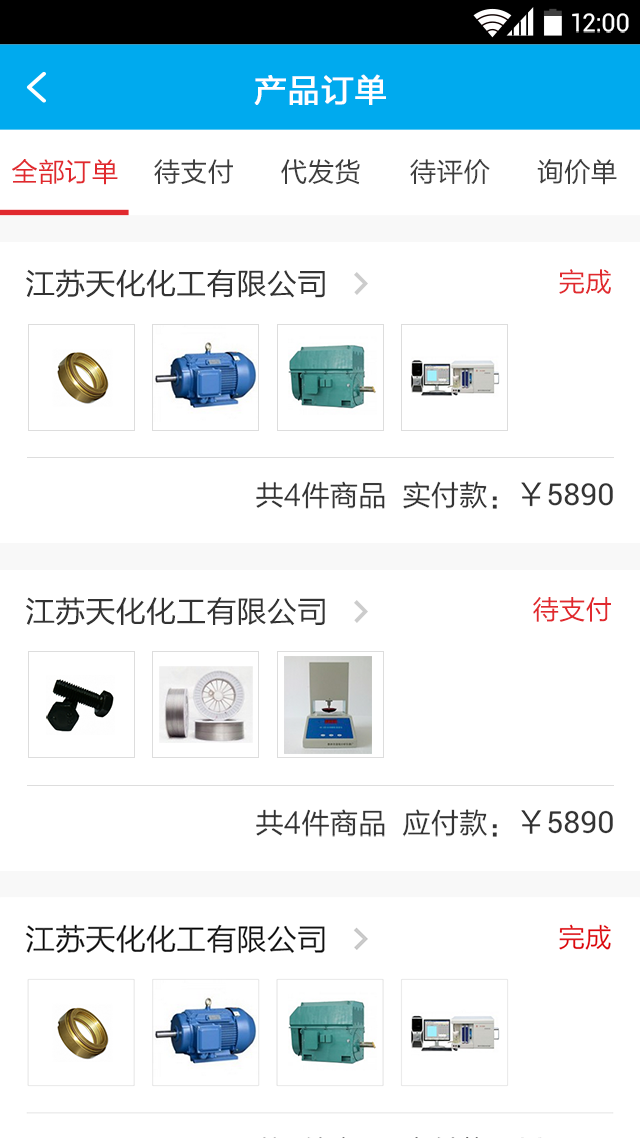
<style>
.page{position:relative;width:640px;height:1138px;background:#ffffff}
.page>*{position:absolute;margin:0}
.t1{font:24.9px "Roboto-Regular";color:#ffffff}
.t2{font:32px "FZLTHJW--GB1-0";letter-spacing:0.02em;color:#ffffff;font-weight:bold}
.t3{font:26.7px "FZLTHJW--GB1-0";color:#e1292e}
.t4{font:26.7px "FZLTHJW--GB1-0";color:#3d3d3d}
.t5{font:30.2px "FZLTHJW--GB1-0";color:#333333}
.t6{font:28.4px "FZLTHJW--GB1-0";color:#333333}
.t7{font:30.2px "Roboto-Regular";color:#333333}
</style>
<div class="page">
<p class="t1" style="left:572px;top:13px;width:57px;height:20px">12:00</p>
<p class="t2" style="left:254px;top:74px;width:132px;height:31px">产品订单</p>
<p class="t3" style="left:12px;top:159px;width:106px;height:26px">全部订单</p>
<p class="t4" style="left:154px;top:159px;width:79px;height:26px">待支付</p>
<p class="t4" style="left:281px;top:159px;width:79px;height:26px">代发货</p>
<p class="t4" style="left:410px;top:159px;width:80px;height:25px">待评价</p>
<p class="t4" style="left:537px;top:159px;width:80px;height:26px">询价单</p>
<p class="t5" style="left:26px;top:269px;width:299px;height:29px">江苏天化化工有限公司</p>
<p class="t3" style="left:559px;top:269px;width:52px;height:25px">完成</p>
<p class="t6" style="left:256px;top:481px;width:357px;height:28px">共4件商品  实付款：<span class="t5">￥</span><span class="t7">5890</span></p>
<p class="t5" style="left:26px;top:597px;width:299px;height:29px">江苏天化化工有限公司</p>
<p class="t3" style="left:533px;top:597px;width:78px;height:25px">待支付</p>
<p class="t6" style="left:256px;top:809px;width:357px;height:28px">共4件商品  应付款：<span class="t5">￥</span><span class="t7">5890</span></p>
</div>
